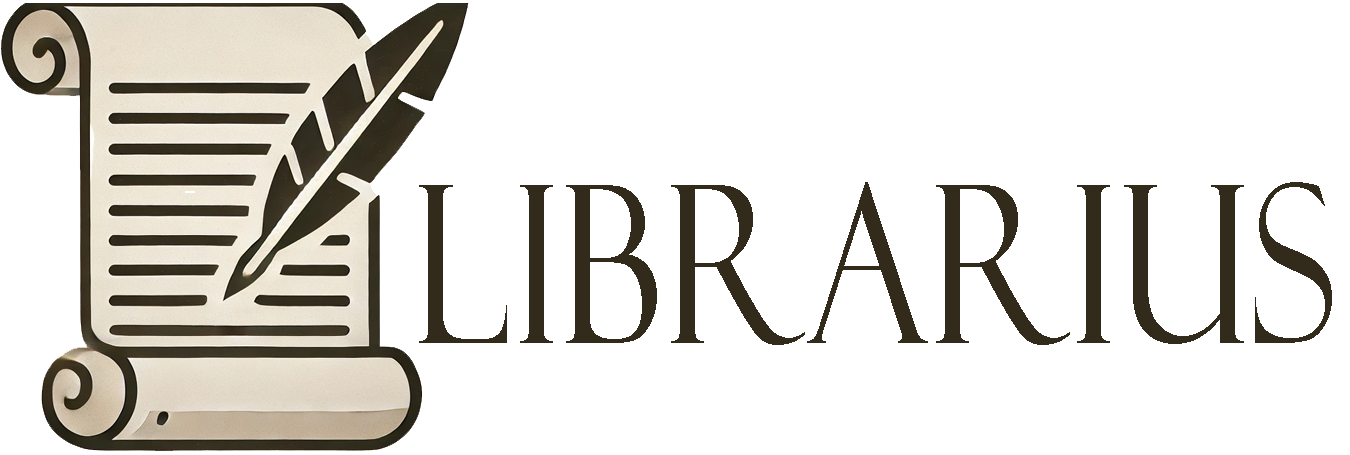
<style>
.page{position:relative;width:1350px;height:455px;background:#ffffff}
.page>*{position:absolute;margin:0}
.t1{font:220.4px "FelixTitlingMT";color:#322b1c;scale:0.81 1}
</style>
<div class="page">
<p class="t1" style="left:419px;top:182px;width:913px;height:163px">Librarius</p>
</div>
